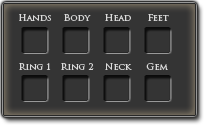
<style>
.page{position:relative;width:205px;height:125px;background:#343434}
.page>*{position:absolute;margin:0}
.t1{font:9px "TrajanPro-Regular";color:#dbdbdb}
</style>
<div class="page">
<p class="t1" style="left:19px;top:14px;width:32px;height:7px">Hands</p>
<p class="t1" style="left:64px;top:14px;width:27px;height:7px">Body</p>
<p class="t1" style="left:105px;top:14px;width:26px;height:7px">Head</p>
<p class="t1" style="left:148px;top:14px;width:21px;height:7px">Feet</p>
<p class="t1" style="left:19px;top:63px;width:32px;height:7px">Ring 1</p>
<p class="t1" style="left:61px;top:63px;width:33px;height:7px">Ring 2</p>
<p class="t1" style="left:105px;top:63px;width:27px;height:7px">Neck</p>
<p class="t1" style="left:146px;top:63px;width:22px;height:7px">Gem</p>
</div>
